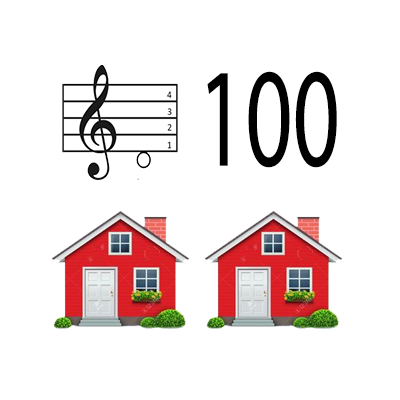
<style>
.page{position:relative;width:400px;height:400px;background:#ffffff}
.page>*{position:absolute;margin:0}
.t1{font:141.7px "MyriadPro-Regular";color:#000000;scale:0.65 1}
</style>
<div class="page">
<p class="t1" style="left:207px;top:71px;width:130px;height:97px">100</p>
</div>
